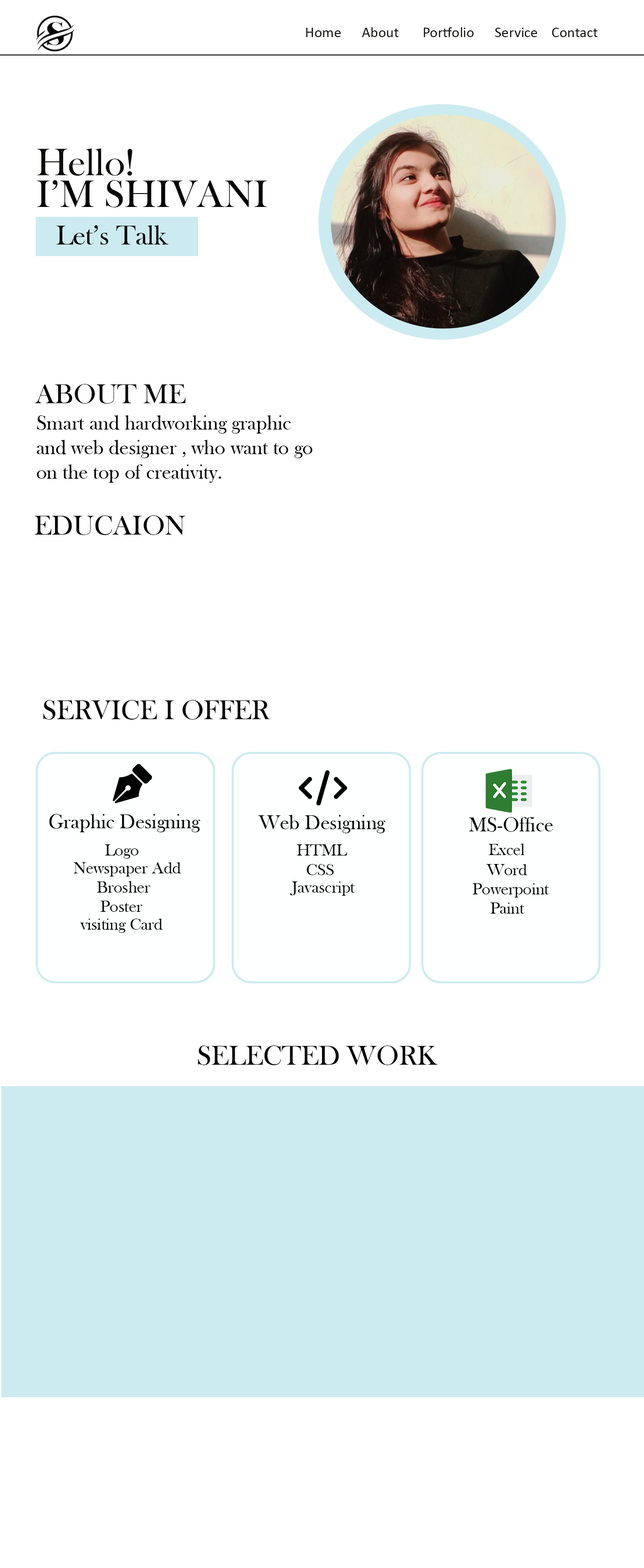
<style>
.page{position:relative;width:644px;height:1568px;background:#ffffff}
.page>*{position:absolute;margin:0}
.t1{font:14.9px "Calibri";color:#0a0906}
.t2{font:39.1px "BaskOldFace";color:#0a0906}
.t3{font:39.1px "BaskOldFace";color:#030404}
.t4{font:27.9px "BaskOldFace";color:#030404}
.t5{font:20.5px "BaskOldFace";color:#030404}
.t6{font:16.8px "BaskOldFace";color:#030404}
</style>
<div class="page">
<p class="t1" style="left:306px;top:27px;width:291px;height:10px">Home      About       Portfolio      Service    Contact</p>
<p class="t2" style="left:37px;top:148px;width:95px;height:28px">Hello!</p>
<p class="t3" style="left:37px;top:180px;width:230px;height:27px">I’M SHIVANI</p>
<p class="t4" style="left:56px;top:225px;width:113px;height:19px">Let’s Talk</p>
<p class="t4" style="left:35px;top:384px;width:150px;height:20px">ABOUT ME</p>
<p class="t5" style="left:37px;top:415px;width:275px;height:68px">Smart and hardworking graphic and web designer , who want to go on the top of creativity.</p>
<p class="t4" style="left:34px;top:515px;width:151px;height:20px">EDUCAION</p>
<p class="t4" style="left:43px;top:700px;width:227px;height:20px">SERVICE I OFFER</p>
<p class="t5" style="left:49px;top:814px;width:151px;height:18px">Graphic Designing</p>
<p class="t5" style="left:258px;top:815px;width:127px;height:18px">Web Designing</p>
<p class="t5" style="left:469px;top:817px;width:84px;height:15px">MS-Office</p>
<p class="t6" style="left:105px;top:844px;width:34px;height:15px">Logo</p>
<p class="t6" style="left:297px;top:844px;width:50px;height:12px">HTML</p>
<p class="t6" style="left:489px;top:843px;width:35px;height:12px">Excel</p>
<p class="t6" style="left:73px;top:862px;width:108px;height:15px">Newspaper Add</p>
<p class="t6" style="left:307px;top:864px;width:26px;height:11px">CSS</p>
<p class="t6" style="left:486px;top:864px;width:41px;height:11px">Word</p>
<p class="t6" style="left:97px;top:881px;width:54px;height:12px">Brosher</p>
<p class="t6" style="left:290px;top:881px;width:65px;height:15px">Javascript</p>
<p class="t6" style="left:472px;top:883px;width:77px;height:15px">Powerpoint</p>
<p class="t6" style="left:100px;top:901px;width:43px;height:11px">Poster</p>
<p class="t6" style="left:490px;top:902px;width:34px;height:12px">Paint</p>
<p class="t6" style="left:80px;top:919px;width:83px;height:14px">visiting Card</p>
<p class="t4" style="left:198px;top:1045px;width:240px;height:20px">SELECTED WORK</p>
</div>
